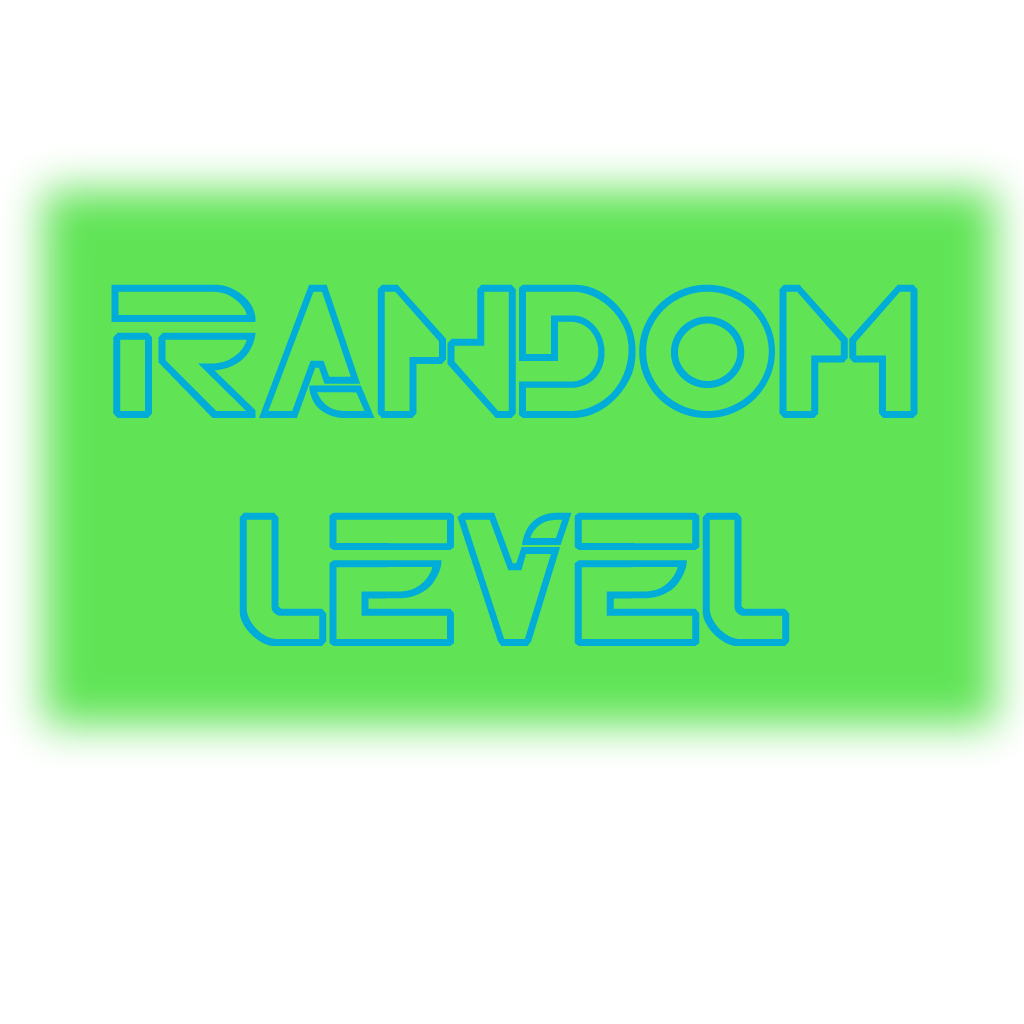
<style>
.page{position:relative;width:1024px;height:1024px;background:#ffffff}
.page>*{position:absolute;margin:0}
.t1{font:190px "TRN";color:#00acd8}
</style>
<div class="page">
<p class="t1" style="left:111px;top:284px;width:807px;height:362px;text-align:center">Random<br>level</p>
</div>
